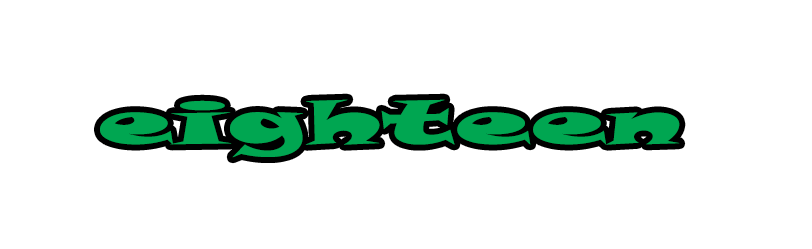
<style>
.page{position:relative;width:812px;height:249px;background:#ffffff}
.page>*{position:absolute;margin:0}
.t1{font:60px "SnapITC-Regular";color:#00a651;scale:2 1}
</style>
<div class="page">
<p class="t1" style="left:100px;top:99px;width:580px;height:59px">eighteen</p>
</div>
